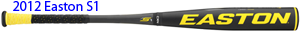
<style>
.page{position:relative;width:300px;height:35px;background:#ffffff}
.page>*{position:absolute;margin:0}
.t1{font:14px "MyriadPro-Regular";color:#0000ff}
</style>
<div class="page">
<p class="t1" style="left:13px;top:1px;width:85px;height:10px">2012 Easton S1</p>
</div>
